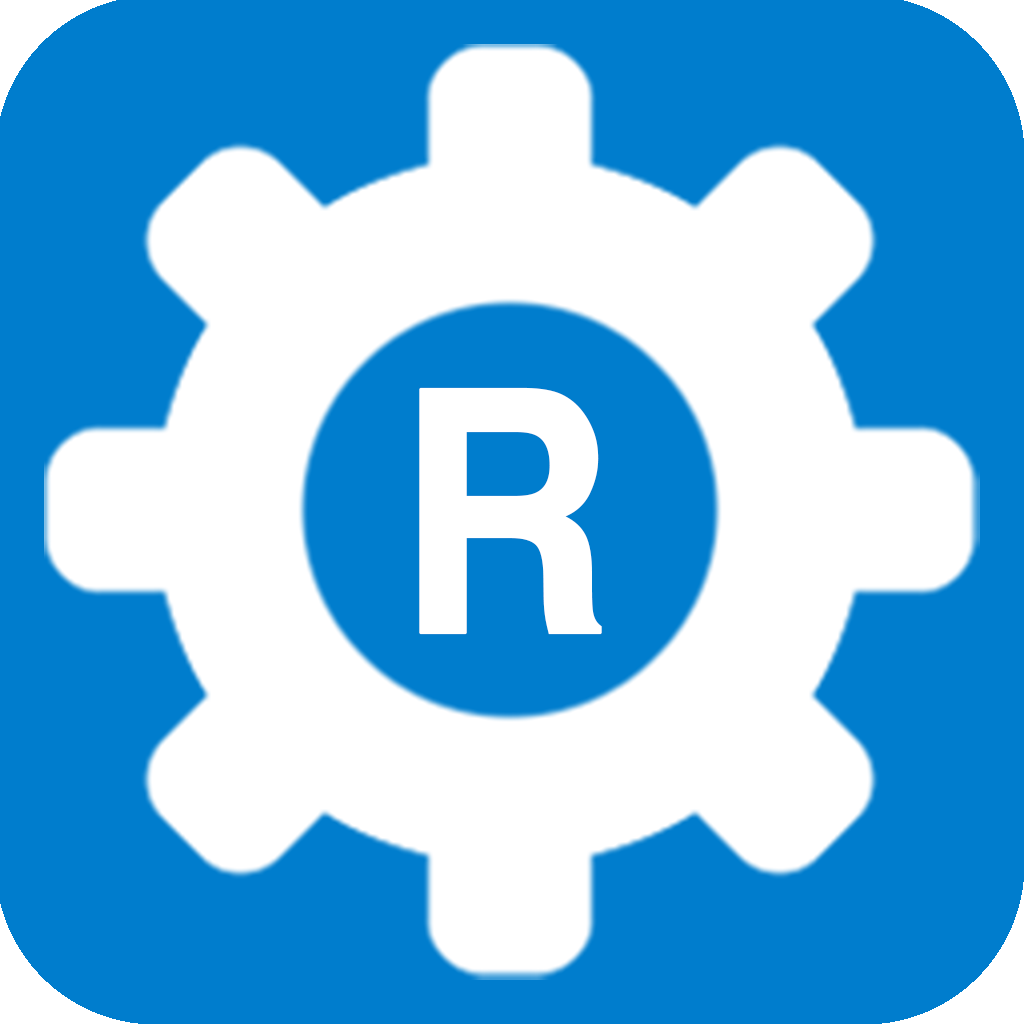
<style>
.page{position:relative;width:1024px;height:1024px;background:#007dcd}
.page>*{position:absolute;margin:0}
.t1{font:339.6px "Helvetica-Bold";color:#ffffff;font-weight:bold;scale:0.9 1}
</style>
<div class="page">
<p class="t1" style="left:419px;top:387px;width:183px;height:248px">R</p>
</div>
